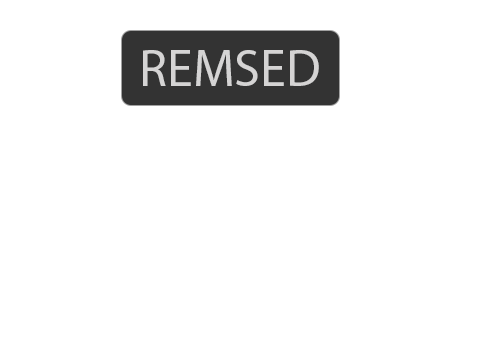
<style>
.page{position:relative;width:504px;height:360px;background:#ffffff}
.page>*{position:absolute;margin:0}
.t1{font:52px "MyriadPro-Regular";color:#d5d4d4}
</style>
<div class="page">
<p class="t1" style="left:143px;top:50px;width:176px;height:36px">REMSED</p>
</div>
